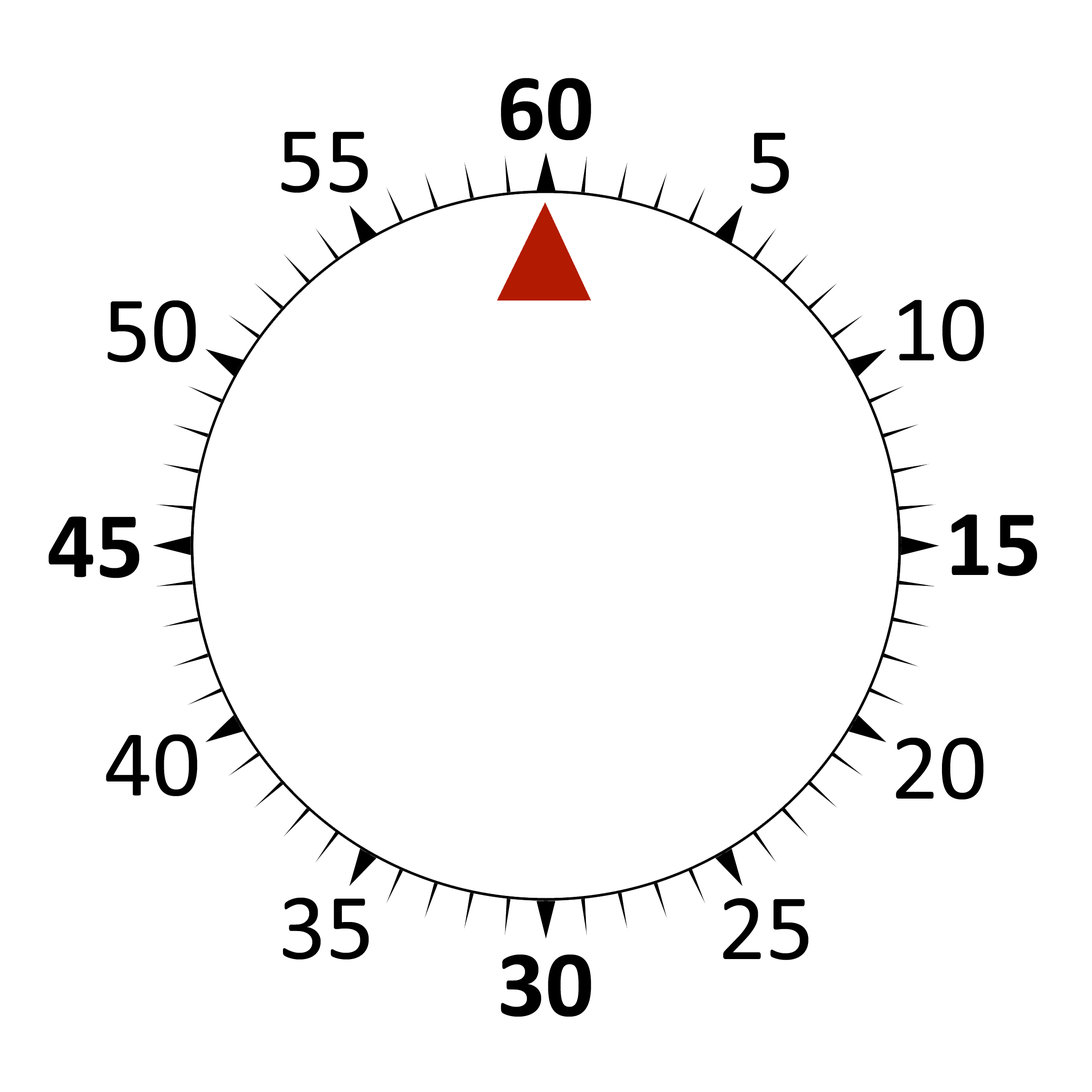
<style>
.page{position:relative;width:1092px;height:1092px;background:#ffffff}
.page>*{position:absolute;margin:0}
.t1{font:95px "Calibri-Bold";color:#000000}
.t2{font:95px "Calibri";color:#000000}
</style>
<div class="page">
<p class="t1" style="left:501px;top:78px;width:90px;height:63px">60</p>
<p class="t2" style="left:281px;top:132px;width:87px;height:61px">55</p>
<p class="t2" style="left:751px;top:132px;width:38px;height:62px">5</p>
<p class="t2" style="left:107px;top:300px;width:89px;height:62px">50</p>
<p class="t2" style="left:899px;top:299px;width:85px;height:62px">10</p>
<p class="t1" style="left:48px;top:517px;width:92px;height:61px">45</p>
<p class="t1" style="left:951px;top:514px;width:86px;height:62px">15</p>
<p class="t2" style="left:106px;top:734px;width:92px;height:62px">40</p>
<p class="t2" style="left:896px;top:737px;width:88px;height:63px">20</p>
<p class="t2" style="left:282px;top:897px;width:87px;height:63px">35</p>
<p class="t2" style="left:723px;top:898px;width:86px;height:62px">25</p>
<p class="t1" style="left:501px;top:954px;width:90px;height:63px">30</p>
</div>
